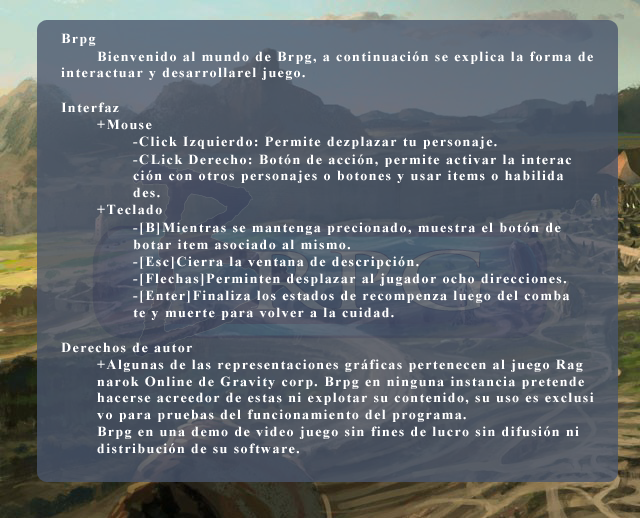
<style>
.page{position:relative;width:640px;height:518px}
.page>*{position:absolute;margin:0}
.t1{font:14px "TimesNewRomanPS-BoldMT";letter-spacing:0.1em;color:#ffffff}
</style>
<div class="page">
<p class="t1" style="left:61px;top:33px;width:533px;height:421px">Brpg<br> Bienvenido al mundo de Brpg, a continuación se explica la forma de interactuar y desarrollarel juego.<br><br>Interfaz<br> +Mouse<br>  -Click Izquierdo: Permite dezplazar tu personaje.<br>  -CLick Derecho: Botón de acción, permite activar la interac   ción con otros personajes o botones y usar items o habilida    des.<br> +Teclado<br>  -[B]Mientras se mantenga precionado, muestra el botón de    botar item asociado al mismo.<br>  -[Esc]Cierra la ventana de descripción.<br>  -[Flechas]Perminten desplazar al jugador ocho direcciones.<br>  -[Enter]Finaliza los estados de recompenza luego del comba   te y muerte para volver a la cuidad.<br><br>Derechos de autor<br> +Algunas de las representaciones gráficas pertenecen al juego Rag  narok Online de Gravity corp. Brpg en ninguna instancia pretende   hacerse acreedor de estas ni explotar su contenido, su uso es exclusi  vo para pruebas del funcionamiento del programa.<br> Brpg en una demo de video juego sin fines de lucro sin difusión ni   distribución de su software.</p>
</div>
